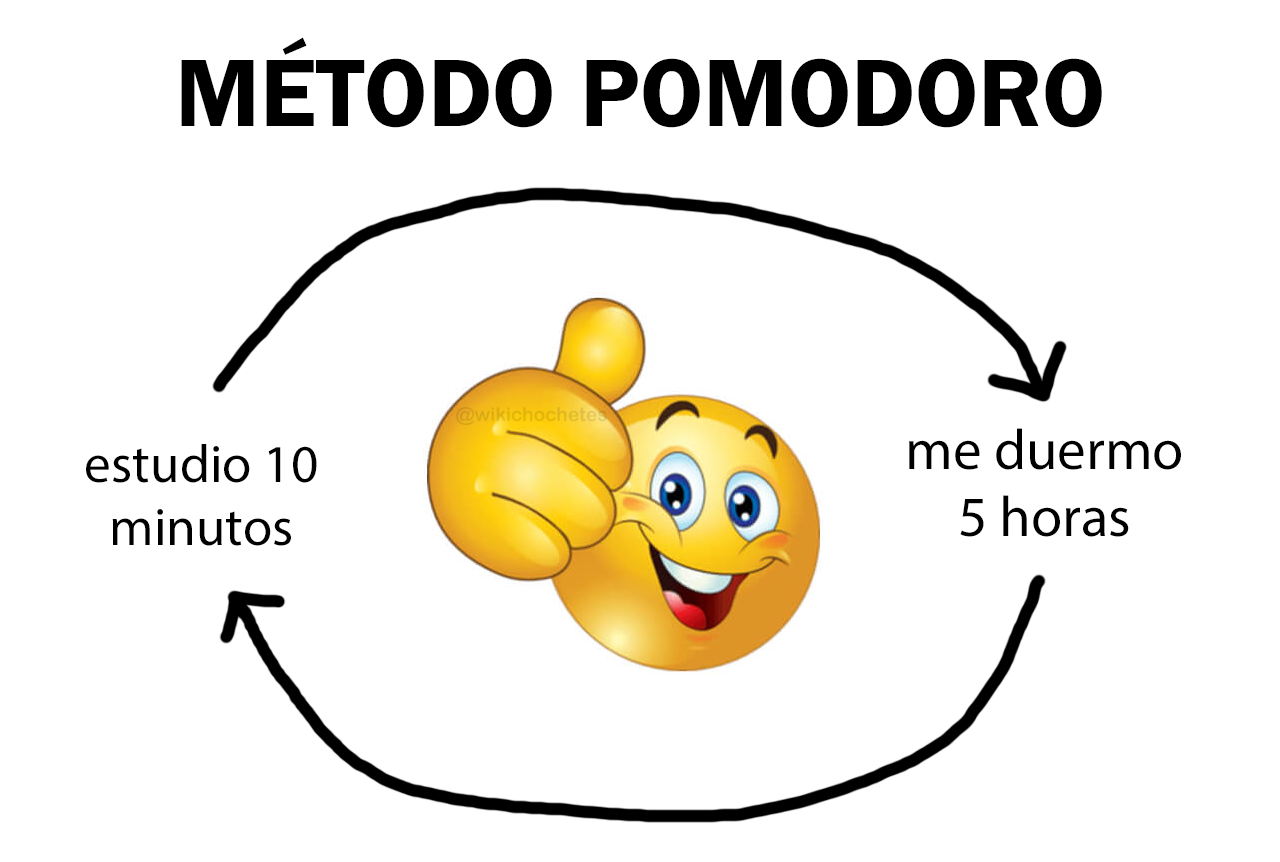
<style>
.page{position:relative;width:1280px;height:862px;background:#ffffff}
.page>*{position:absolute;margin:0}
.t1{font:98.9px "FranklinGothic-Demi";color:#000000}
.t2{font:19.2px "ArialRoundedMTBold"}
.t3{font:57.1px "MyriadPro-Regular";color:#000000}
.t4{font:53.5px "MyriadPro-Regular";color:#000000}
</style>
<div class="page">
<p class="t1" style="left:181px;top:37px;width:921px;height:91px">MÉTODO POMODORO</p>
<p class="t2" style="left:456px;top:407px;width:151px;height:18px">@wikichochetes</p>
<p class="t3" style="left:909px;top:428px;width:272px;height:109px;text-align:center">me duermo<br>5 horas</p>
<p class="t4" style="left:86px;top:444px;width:231px;height:102px;text-align:center">estudio 10<br>minutos</p>
</div>
